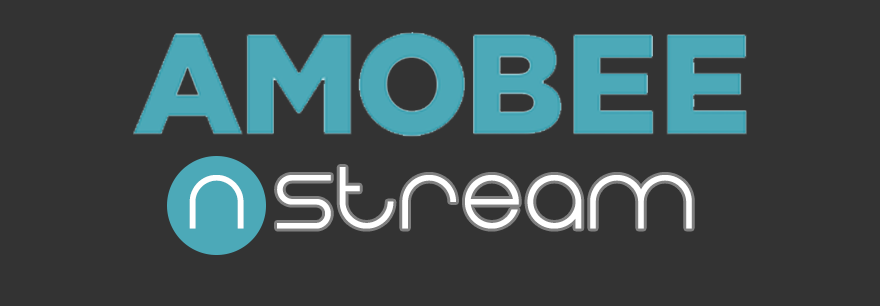
<style>
.page{position:relative;width:880px;height:306px;background:#333333}
.page>*{position:absolute;margin:0}
.t1{font:106.5px "EightOne";color:#ffffff;font-weight:bold}
</style>
<div class="page">
<p class="t1" style="left:277px;top:167px;width:415px;height:62px">stream</p>
<p class="t1" style="left:189px;top:175px;width:55px;height:54px">n</p>
</div>
